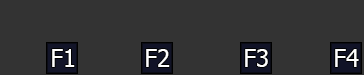
<style>
.page{position:relative;width:364px;height:75px;background:#333333}
.page>*{position:absolute;margin:0}
.t1{font:24px "Tahoma";color:#ffffff}
</style>
<div class="page">
<p class="t1" style="left:52px;top:49px;width:23px;height:18px">F1</p>
<p class="t1" style="left:146px;top:49px;width:24px;height:18px">F2</p>
<p class="t1" style="left:245px;top:49px;width:23px;height:18px">F3</p>
<p class="t1" style="left:335px;top:49px;width:24px;height:18px">F4</p>
</div>
